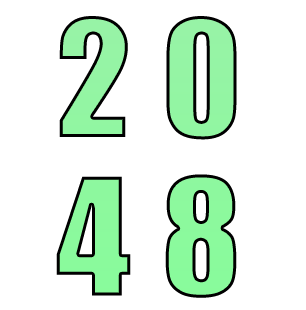
<style>
.page{position:relative;width:306px;height:310px;background:#ffffff}
.page>*{position:absolute;margin:0}
.t1{font:150px/158.4px "Impact";letter-spacing:0.2em;color:#8cf59d}
</style>
<div class="page">
<p class="t1" style="left:56px;top:16px;width:181px;height:282px">20<br>48</p>
</div>
